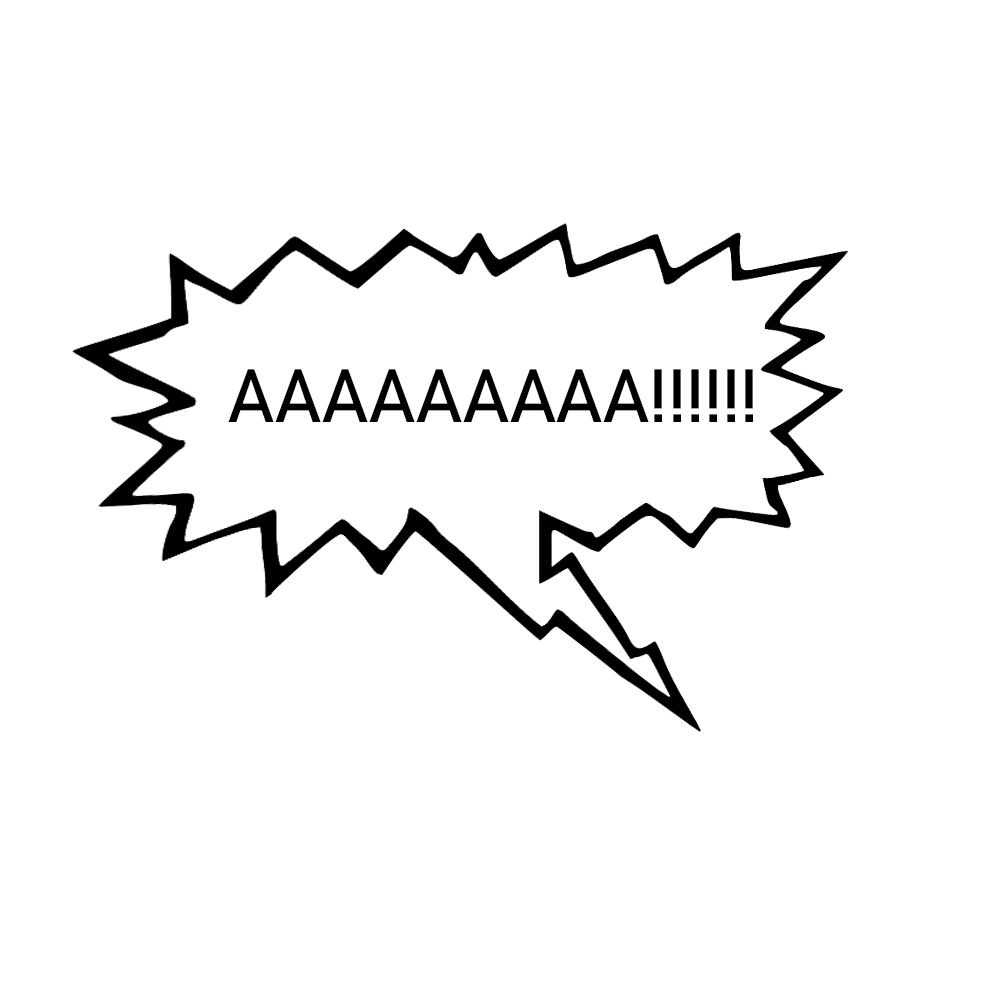
<style>
.page{position:relative;width:1000px;height:1000px;background:#ffffff}
.page>*{position:absolute;margin:0}
.t1{font:74.1px "Bahnschrift";letter-spacing:-0.025em;color:#000000}
</style>
<div class="page">
<p class="t1" style="left:228px;top:369px;width:525px;height:53px">AAAAAAAAA!!!!!!</p>
</div>
